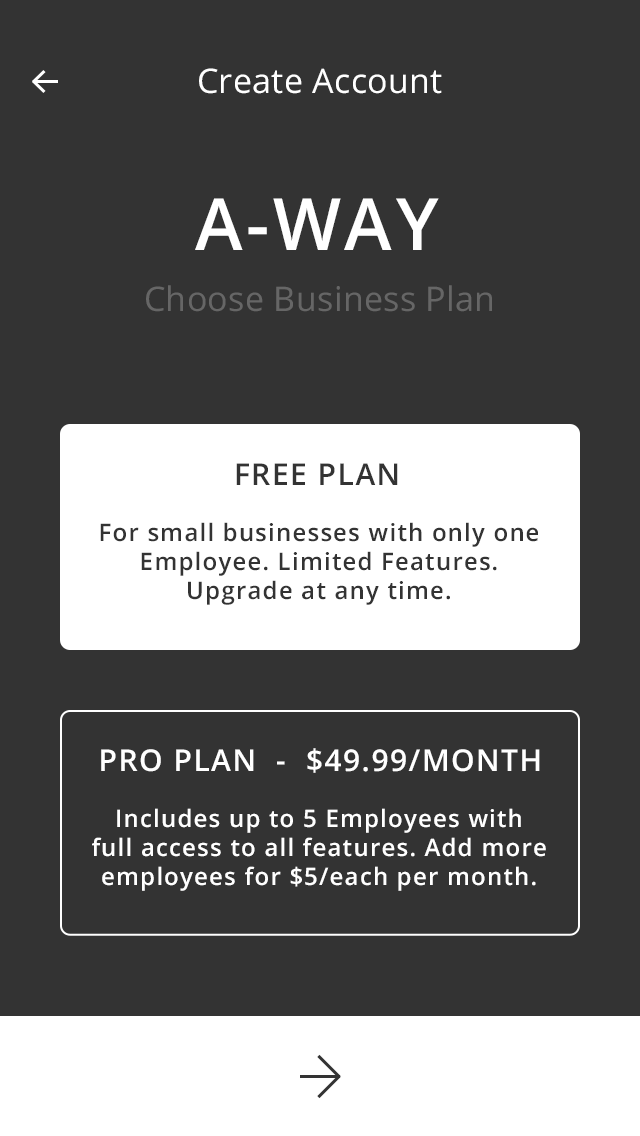
<style>
.page{position:relative;width:640px;height:1136px;background:#333333}
.page>*{position:absolute;margin:0}
.t1{font:34px "OpenSans";letter-spacing:0.01em;color:#ffffff}
.t2{font:72px "OpenSans-Semibold";letter-spacing:0.05em;color:#ffffff;text-transform:uppercase}
.t3{font:34px "OpenSans";letter-spacing:0.01em;color:#666666}
.t4{font:30px "OpenSans-Semibold";letter-spacing:0.05em;color:#333333;text-transform:uppercase}
.t5{font:24px "OpenSans-Semibold";letter-spacing:0.05em;color:#333333}
.t6{font:30px "OpenSans-Semibold";letter-spacing:0.05em;color:#ffffff;text-transform:uppercase}
.t7{font:24px "OpenSans-Semibold";letter-spacing:0.05em;color:#ffffff}
</style>
<div class="page">
<p class="t1" style="left:199px;top:68px;width:243px;height:26px">Create Account</p>
<p class="t2" style="left:195px;top:198px;width:244px;height:52px">A-WAY</p>
<p class="t3" style="left:146px;top:285px;width:346px;height:27px">Choose Business Plan</p>
<p class="t4" style="left:236px;top:463px;width:162px;height:22px">FREE PLAN</p>
<p class="t5" style="left:100px;top:522px;width:438px;height:83px;text-align:center">For small businesses with only one Employee. Limited Features. <br>Upgrade at any time.</p>
<p class="t6" style="left:101px;top:748px;width:439px;height:25px">PRO PLAN  -  $49.99/month</p>
<p class="t7" style="left:92px;top:808px;width:454px;height:83px;text-align:center">Includes up to 5 Employees with <br>full access to all features. Add more employees for $5/each per month.</p>
</div>
